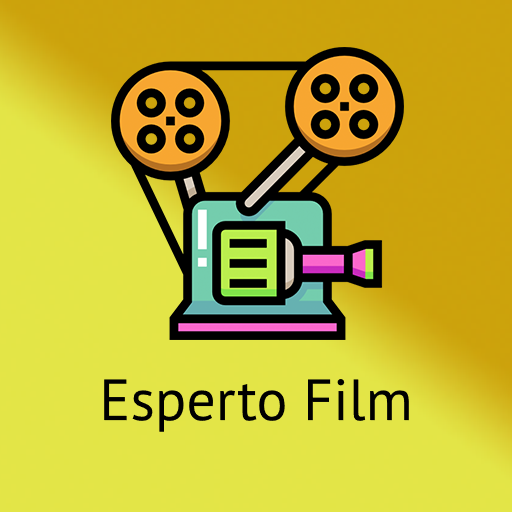
<style>
.page{position:relative;width:512px;height:512px;background:#e3e547}
.page>*{position:absolute;margin:0}
.t1{font:58.1px "MyriadPro-Regular";color:#000000}
</style>
<div class="page">
<p class="t1" style="left:104px;top:378px;width:305px;height:54px">Esperto Film</p>
</div>
